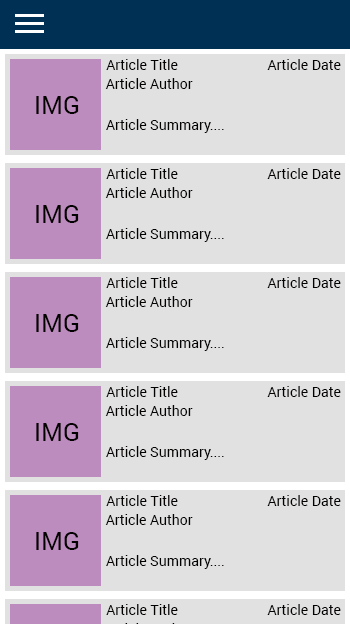
<style>
.page{position:relative;width:350px;height:624px;background:#e1e1e1}
.page>*{position:absolute;margin:0}
.t1{font:14px "Roboto-Regular";color:#040201}
.t2{font:25px "Roboto-Regular";color:#040201}
</style>
<div class="page">
<p class="t1" style="left:106px;top:59px;width:72px;height:11px">Article Title</p>
<p class="t1" style="left:267px;top:59px;width:74px;height:11px">Article Date</p>
<p class="t1" style="left:105px;top:78px;width:88px;height:11px">Article Author</p>
<p class="t2" style="left:36px;top:96px;width:43px;height:18px">IMG</p>
<p class="t1" style="left:106px;top:119px;width:118px;height:14px">Article Summary....</p>
<p class="t1" style="left:106px;top:168px;width:72px;height:11px">Article Title</p>
<p class="t1" style="left:267px;top:168px;width:74px;height:11px">Article Date</p>
<p class="t1" style="left:105px;top:187px;width:88px;height:11px">Article Author</p>
<p class="t2" style="left:36px;top:205px;width:43px;height:18px">IMG</p>
<p class="t1" style="left:106px;top:228px;width:118px;height:14px">Article Summary....</p>
<p class="t1" style="left:106px;top:277px;width:72px;height:11px">Article Title</p>
<p class="t1" style="left:267px;top:277px;width:74px;height:11px">Article Date</p>
<p class="t1" style="left:105px;top:296px;width:88px;height:11px">Article Author</p>
<p class="t2" style="left:36px;top:314px;width:43px;height:18px">IMG</p>
<p class="t1" style="left:106px;top:337px;width:118px;height:14px">Article Summary....</p>
<p class="t1" style="left:106px;top:386px;width:72px;height:11px">Article Title</p>
<p class="t1" style="left:267px;top:386px;width:74px;height:11px">Article Date</p>
<p class="t1" style="left:105px;top:405px;width:88px;height:11px">Article Author</p>
<p class="t2" style="left:36px;top:423px;width:43px;height:18px">IMG</p>
<p class="t1" style="left:106px;top:446px;width:118px;height:14px">Article Summary....</p>
<p class="t1" style="left:106px;top:495px;width:72px;height:11px">Article Title</p>
<p class="t1" style="left:267px;top:495px;width:74px;height:11px">Article Date</p>
<p class="t1" style="left:105px;top:514px;width:88px;height:11px">Article Author</p>
<p class="t2" style="left:36px;top:532px;width:43px;height:18px">IMG</p>
<p class="t1" style="left:106px;top:555px;width:118px;height:14px">Article Summary....</p>
<p class="t1" style="left:106px;top:604px;width:72px;height:11px">Article Title</p>
<p class="t1" style="left:267px;top:604px;width:74px;height:11px">Article Date</p>
</div>
